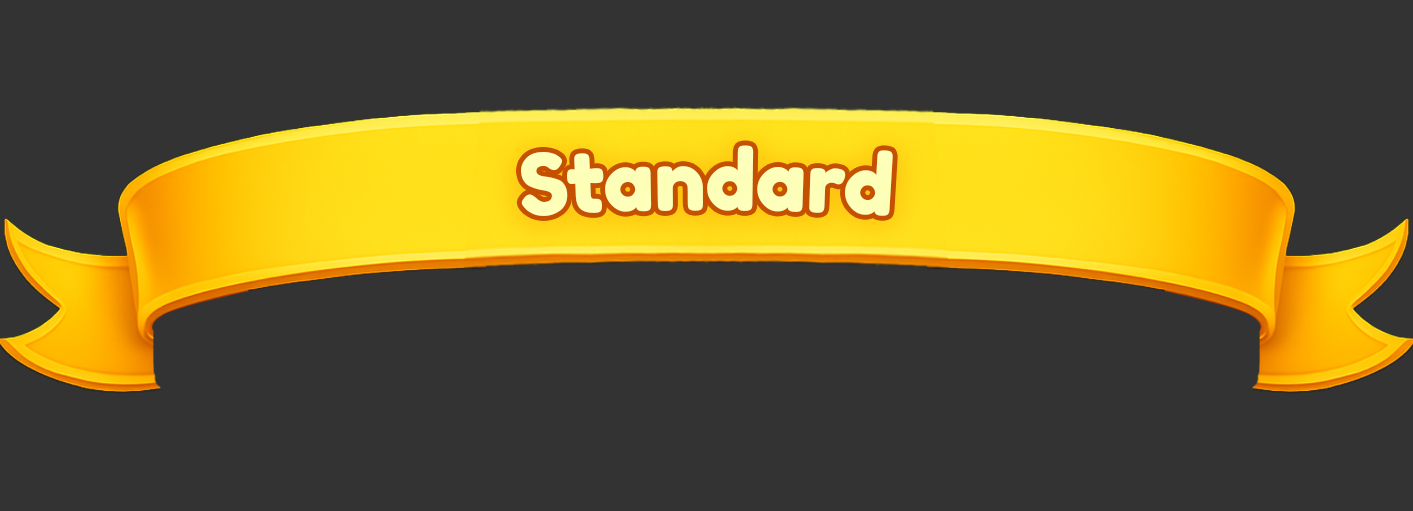
<style>
.page{position:relative;width:1413px;height:511px;background:#333333}
.page>*{position:absolute;margin:0}
.t1{font:84.6px "FredokaOne-Regular";letter-spacing:-0.01em;color:#fdffb9}
</style>
<div class="page">
<p class="t1" style="left:521px;top:145px;width:372px;height:71px">Standard</p>
</div>
